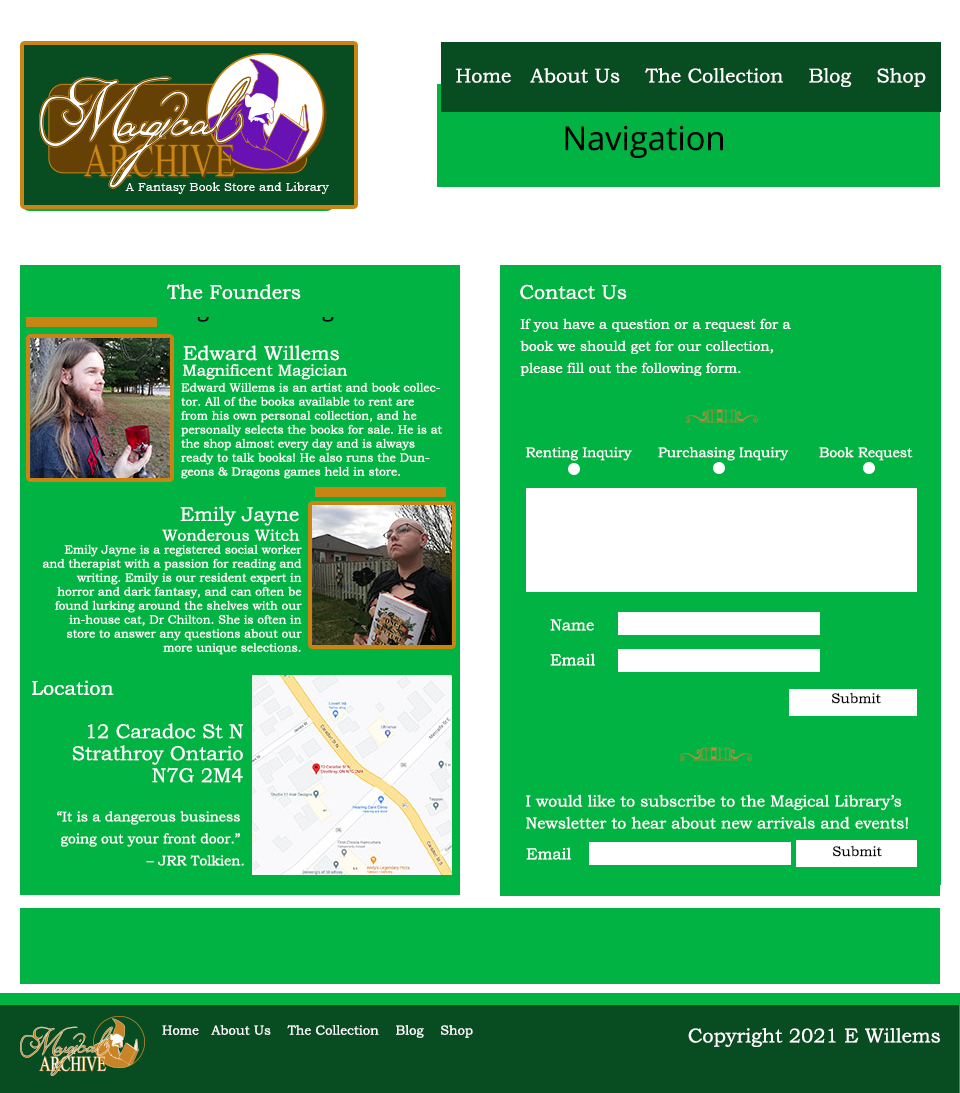
<style>
.page{position:relative;width:960px;height:1093px;background:#00b343}
.page>*{position:absolute;margin:0}
.t1{font:20px "BookmanOldStyle";color:#ffffff}
.t2{font:14px/22px "BookmanOldStyle";color:#ffffff}
.t3{font:16px "BookmanOldStyle";color:#ffffff}
.t4{font:12px/14px "BookmanOldStyle";color:#ffffff}
.t5{font:14px "BookmanOldStyle";color:#ffffff}
.t6{font:14px "BookmanOldStyle";color:#000000}
.t7{font:20px/22px "BookmanOldStyle";color:#ffffff}
.t8{font:16px/22px "BookmanOldStyle";color:#ffffff}
.t9{font:13.2px "BookmanOldStyle";color:#ffffff}
</style>
<div class="page">
<p class="t1" style="left:456px;top:68px;width:470px;height:19px">Home   About Us    The Collection    Blog    Shop</p>
<p class="t1" style="left:167px;top:284px;width:134px;height:16px">The Founders</p>
<p class="t1" style="left:520px;top:284px;width:107px;height:16px">Contact Us</p>
<p class="t2" style="left:520px;top:318px;width:271px;height:58px">If you have a question or a request for a<br>book we should get for our collection, <br>please fill out the following form.</p>
<p class="t1" style="left:183px;top:345px;width:156px;height:16px">Edward Willems</p>
<p class="t3" style="left:183px;top:364px;width:164px;height:16px">Magnificent Magician</p>
<p class="t4" style="left:181px;top:382px;width:261px;height:97px">Edward Willems is an artist and book collector. All of the books available to rent are from his own personal collection, and he personally selects the books for sale. He is at the shop almost every day and is always ready to talk books! He also runs the Dungeons &amp; Dragons games held in store.</p>
<p class="t5" style="left:526px;top:447px;width:387px;height:14px">Renting Inquiry      Purchasing Inquiry       Book Request</p>
<p class="t1" style="left:180px;top:506px;width:119px;height:20px">Emily Jayne</p>
<p class="t3" style="left:162px;top:529px;width:138px;height:12px">Wonderous Witch</p>
<p class="t4" style="left:43px;top:544px;width:259px;height:111px;text-align:right">Emily Jayne is a registered social worker and therapist with a passion for reading and writing. Emily is our resident expert in horror and dark fantasy, and can often be found lurking around the shelves with our in-house cat, Dr Chilton. She is often in store to answer any questions about our more unique selections.</p>
<p class="t3" style="left:550px;top:619px;width:44px;height:12px">Name</p>
<p class="t3" style="left:550px;top:653px;width:45px;height:13px">Email</p>
<p class="t1" style="left:32px;top:680px;width:82px;height:15px">Location</p>
<p class="t6" style="left:831px;top:692px;width:50px;height:12px">Submit</p>
<p class="t7" style="left:72px;top:723px;width:171px;height:60px;text-align:right">12 Caradoc St N<br>Strathroy Ontario<br>N7G 2M4</p>
<p class="t8" style="left:526px;top:794px;width:382px;height:35px">I would like to subscribe to the Magical Library’s<br>Newsletter to hear about new arrivals and events!</p>
<p class="t2" style="left:57px;top:811px;width:187px;height:55px;text-align:right">“It is a dangerous business <br>going out your front door.” <br>– JRR Tolkien.</p>
<p class="t6" style="left:832px;top:845px;width:50px;height:12px">Submit</p>
<p class="t3" style="left:526px;top:847px;width:45px;height:13px">Email</p>
<p class="t9" style="left:162px;top:1025px;width:311px;height:13px">Home   About Us    The Collection    Blog    Shop</p>
<p class="t1" style="left:688px;top:1028px;width:252px;height:19px">Copyright 2021 E Willems</p>
</div>
